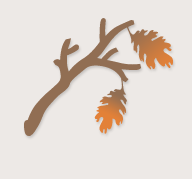
<style>
.page{position:relative;width:192px;height:179px;background:#ede9e6}
.page>*{position:absolute;margin:0}
.t1{font:140px "Plants-Regular";color:#916e53;font-weight:bold}
.t2{font:72px "Plants-Regular";font-style:italic}
.t3{font:65px "Plants-Regular"}
</style>
<div class="page">
<p class="t1" style="left:24px;top:18px;width:117px;height:118px;rotate:-12deg">-</p>
<p class="t2" style="left:126px;top:24px;width:47px;height:46px;rotate:-38deg">o</p>
<p class="t3" style="left:94px;top:78px;width:33px;height:56px;rotate:180deg">o</p>
</div>
